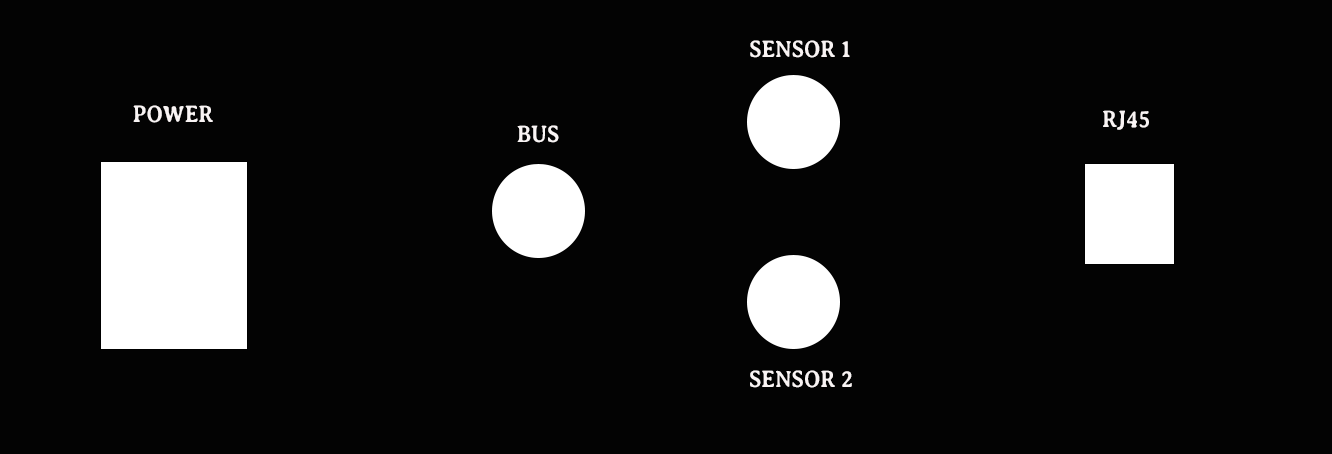
<style>
.page{position:relative;width:1332px;height:454px;background:#030303}
.page>*{position:absolute;margin:0}
.t1{font:24px "AveriaSerifLibre-Bold";color:#f9f4f4;scale:0.91 1}
.t2{font:12px "AveriaSerifLibre-Bold";color:#f9f4f4;scale:0.91 1}
</style>
<div class="page">
<p class="t1" style="left:750px;top:40px;width:100px;height:18px">SENSOR 1</p>
<p class="t1" style="left:133px;top:105px;width:80px;height:18px">POWER</p>
<p class="t1" style="left:1103px;top:110px;width:46px;height:20px">RJ45</p>
<p class="t1" style="left:517px;top:125px;width:42px;height:18px">BUS</p>
<p class="t2" style="left:750px;top:370px;width:102px;height:18px">SENSOR 2</p>
</div>
